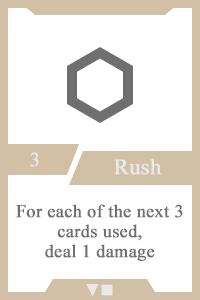
<style>
.page{position:relative;width:200px;height:300px;background:#ffffff}
.page>*{position:absolute;margin:0}
.t1{font:20px "TimesNewRomanPSMT";color:#e9e9e9;font-weight:bold}
.t2{font:22px "TimesNewRomanPSMT";color:#e9e9e9;font-weight:bold}
.t3{font:18px/20px "TimesNewRomanPSMT";color:#6f6f6f;font-weight:bold}
.t4{font:14px "AdobeHeitiStd-Regular";color:#e9e9e9;font-weight:bold}
</style>
<div class="page">
<p class="t1" style="left:30px;top:152px;width:9px;height:15px">3</p>
<p class="t2" style="left:114px;top:158px;width:48px;height:17px">Rush</p>
<p class="t3" style="left:16px;top:204px;width:167px;height:57px;text-align:center">For each of the next 3 cards used,<br>deal 1 damage</p>
<p class="t4" style="left:86px;top:284px;width:27px;height:12px">▼■</p>
</div>
